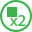
<style>
.page{position:relative;width:32px;height:32px;background:#ffffff}
.page>*{position:absolute;margin:0}
.t1{font:16.7px "MyriadPro-Regular";color:#39b54a}
</style>
<div class="page">
<p class="t1" style="left:10px;top:15px;width:16px;height:11px">x2</p>
</div>
